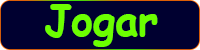
<style>
.page{position:relative;width:200px;height:50px;background:#000030}
.page>*{position:absolute;margin:0}
.t1{font:41.7px "ComicSansMS-Bold";color:#6cff00}
</style>
<div class="page">
<p class="t1" style="left:45px;top:4px;width:113px;height:43px">Jogar</p>
</div>
